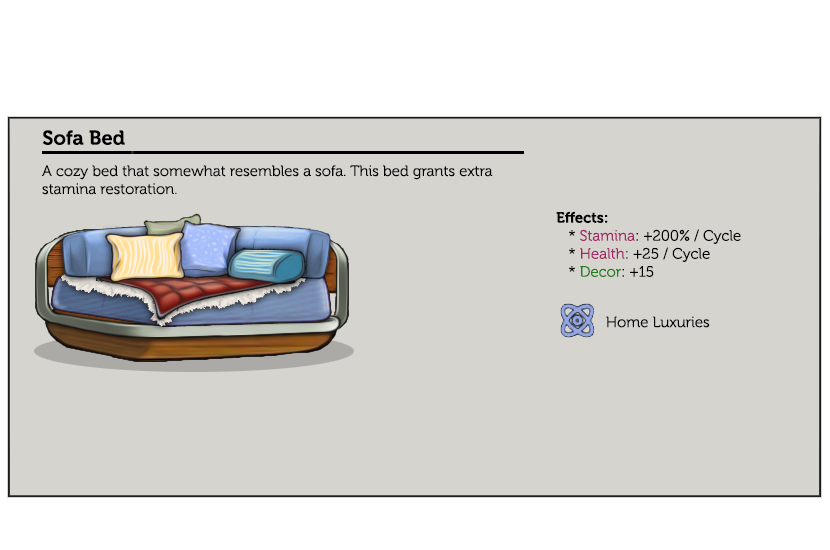
<style>
.page{position:relative;width:830px;height:550px;background:#d6d4cf}
.page>*{position:absolute;margin:0}
.t1{font:20px "Museo-700";color:#000000}
.t2{font:15px "Museo-300";color:#000000}
.t3{font:15px "Museo-700";color:#000000}
.t4{font:15px "Museo-300";color:#a12864}
.t5{font:15px "Museo-300";color:#247d1a}
.t6{font:15px "Museo-300";color:#020202}
</style>
<div class="page">
<p class="t1" style="left:42px;top:130px;width:83px;height:15px">Sofa Bed</p>
<p class="t2" style="left:42px;top:165px;width:451px;height:30px">A cozy bed that somewhat resembles a sofa. This bed grants extra stamina restoration.</p>
<p class="t2" style="left:556px;top:211px;width:185px;height:66px"><span class="t3">Effects:</span><br>   * <span class="t4">Stamina</span>: +200% / Cycle                    <br>   * <span class="t4">Health</span>: +25 / Cycle<br>   * <span class="t5">Decor</span>: +15</p>
<p class="t6" style="left:606px;top:316px;width:104px;height:12px">Home Luxuries</p>
</div>
